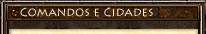
<style>
.page{position:relative;width:206px;height:34px}
.page>*{position:absolute;margin:0}
.t1{font:12px "LithosPro-Regular";color:#fcead6}
</style>
<div class="page">
<p class="t1" style="left:20px;top:7px;width:133px;height:10px">Comandos e Cidades</p>
</div>
